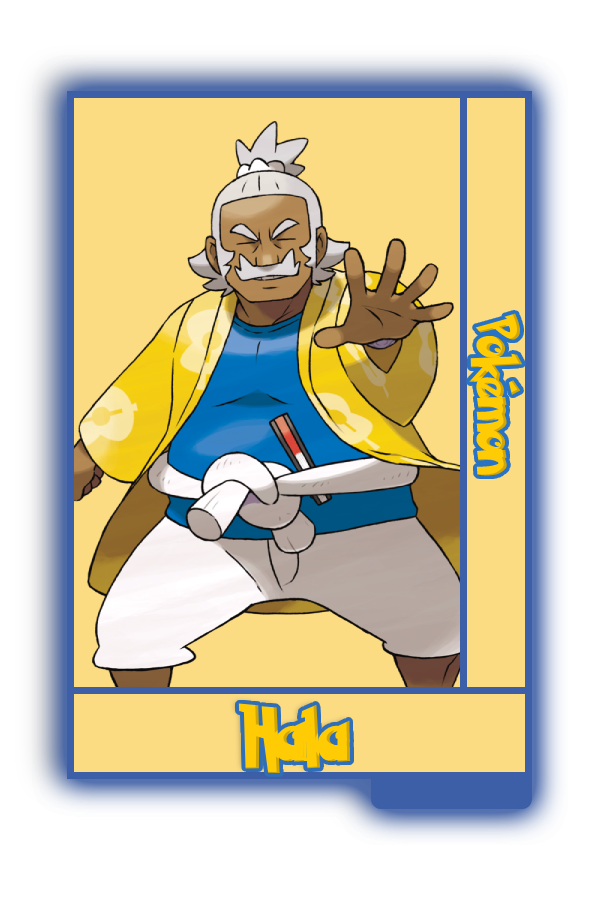
<style>
.page{position:relative;width:600px;height:900px;background:#fbdc83}
.page>*{position:absolute;margin:0}
.t1{font:48.8px "PokemonSolidNormal";color:#ffcb05;scale:0.8 1}
.t2{font:60.1px "PokemonSolidNormal";color:#ffcb05;scale:0.96 1}
</style>
<div class="page">
<p class="t1" style="left:469px;top:313px;width:54px;height:163px;rotate:90deg">Pokémon</p>
<p class="t2" style="left:238px;top:703px;width:113px;height:70px">Hala</p>
</div>
